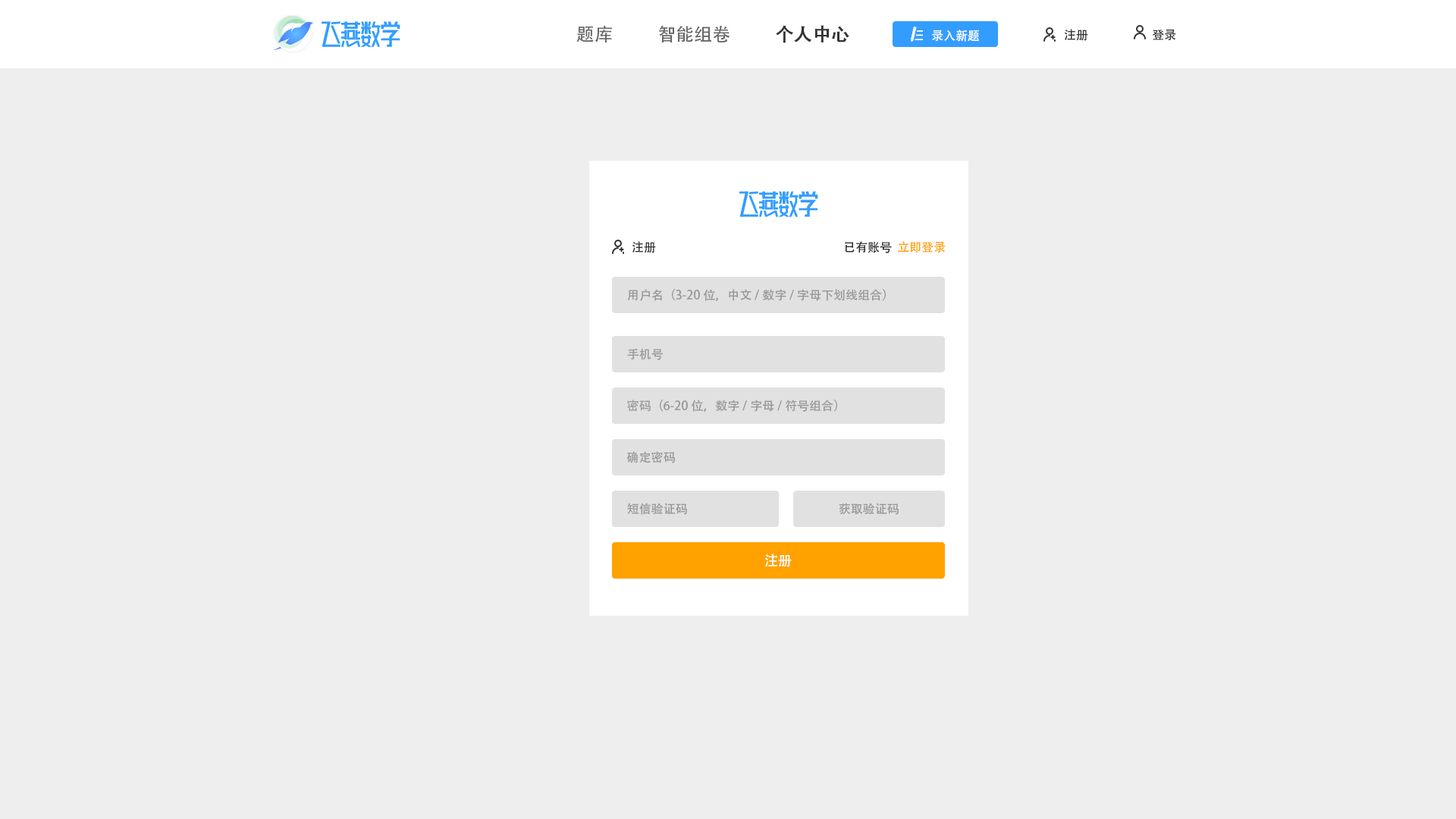
<style>
.page{position:relative;width:1456px;height:819px;background:#eeeeee}
.page>*{position:absolute;margin:0}
.t1{font:18.2px "AdobeHeitiStd-Regular";color:#666666}
.t2{font:18.2px "AdobeHeitiStd-Regular";color:#333333;font-weight:bold}
.t3{font:12.1px "AdobeHeitiStd-Regular";color:#ffffff}
.t4{font:12.1px "AdobeHeitiStd-Regular";color:#333333}
.t5{font:12.1px "AdobeHeitiStd-Regular";color:#ffa200}
.t6{font:12.1px "AdobeHeitiStd-Regular";color:#999999}
.t7{font:13.6px "AdobeHeitiStd-Regular";color:#ffffff}
</style>
<div class="page">
<p class="t1" style="left:576px;top:26px;width:36px;height:16px">题库</p>
<p class="t1" style="left:659px;top:25px;width:71px;height:17px">智能组卷</p>
<p class="t2" style="left:776px;top:25px;width:73px;height:18px">个人中心</p>
<p class="t3" style="left:932px;top:30px;width:47px;height:12px">录入新题</p>
<p class="t4" style="left:1064px;top:29px;width:24px;height:12px">注册</p>
<p class="t4" style="left:1152px;top:29px;width:24px;height:12px">登录</p>
<p class="t4" style="left:632px;top:241px;width:24px;height:12px">注册</p>
<p class="t4" style="left:845px;top:241px;width:101px;height:12px">已有账号  <span class="t5">立即登录</span></p>
<p class="t6" style="left:627px;top:289px;width:259px;height:12px">用户名（3-20位，中文/数字/字母下划线组合）</p>
<p class="t6" style="left:627px;top:348px;width:36px;height:12px">手机号</p>
<p class="t6" style="left:627px;top:400px;width:210px;height:12px">密码（6-20位，数字/字母/符号组合）</p>
<p class="t6" style="left:626px;top:451px;width:49px;height:12px">确定密码</p>
<p class="t6" style="left:627px;top:503px;width:60px;height:12px">短信验证码</p>
<p class="t6" style="left:839px;top:503px;width:60px;height:12px">获取验证码</p>
<p class="t7" style="left:765px;top:554px;width:27px;height:13px">注册</p>
</div>
